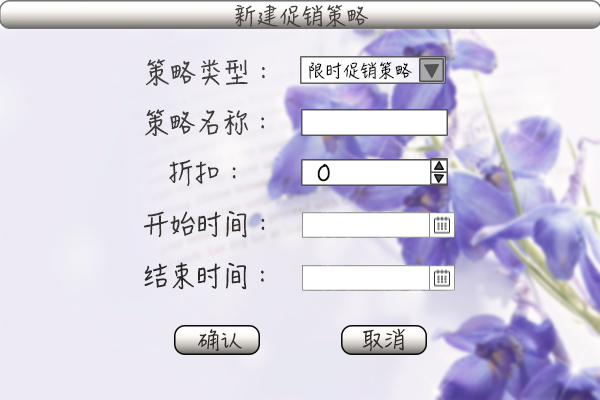
<style>
.page{position:relative;width:600px;height:400px}
.page>*{position:absolute;margin:0}
.t1{font:22px "HanziPenSC-W5";letter-spacing:-0.005em;color:#454141;text-transform:uppercase}
.t2{font:26px "HanziPenSC-W5";letter-spacing:-0.005em;color:#413d3d;text-transform:uppercase}
.t3{font:17px "HanziPenSC-W5";letter-spacing:-0.005em;color:#0b0a0a;text-transform:uppercase}
.t4{font:26px "HanziPenSC-W5";letter-spacing:-0.005em;color:#3e3a3a;text-transform:uppercase}
.t5{font:26px "HanziPenSC-W5";letter-spacing:-0.005em;color:#363333;text-transform:uppercase}
.t6{font:26px "HanziPenSC-W5";letter-spacing:-0.005em;color:#343131;text-transform:uppercase}
.t7{font:26px "HanziPenSC-W5";letter-spacing:-0.005em;color:#2a2828;text-transform:uppercase}
</style>
<div class="page">
<p class="t1" style="left:235px;top:4px;width:134px;height:24px">新建促销策略</p>
<p class="t2" style="left:146px;top:59px;width:119px;height:27px">策略类型：</p>
<p class="t3" style="left:309px;top:61px;width:103px;height:19px">限时促销策略</p>
<p class="t4" style="left:145px;top:109px;width:119px;height:27px">策略名称：</p>
<p class="t5" style="left:169px;top:159px;width:67px;height:27px">折扣：</p>
<p class="t6" style="left:144px;top:211px;width:121px;height:27px">开始时间：</p>
<p class="t7" style="left:144px;top:262px;width:120px;height:28px">结束时间：</p>
</div>
